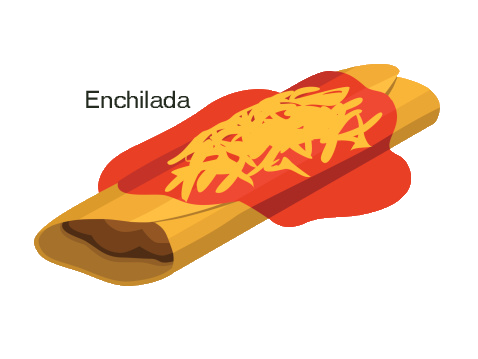
<style>
.page{position:relative;width:478px;height:359px;background:#ffffff}
.page>*{position:absolute;margin:0}
.t1{font:24px "MS Sans Serif";color:#242b20}
</style>
<div class="page">
<p class="t1" style="left:86px;top:90px;width:105px;height:18px">Enchilada</p>
</div>
